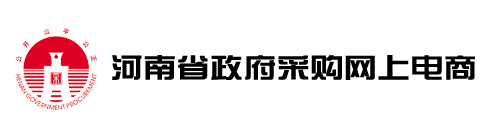
<style>
.page{position:relative;width:500px;height:135px;background:#ffffff}
.page>*{position:absolute;margin:0}
.t1{font:26.8px "HYk1gj";color:#000000;scale:1.25 1}
</style>
<div class="page">
<p class="t1" style="left:112px;top:55px;width:363px;height:25px">河南省政府采购网上电商</p>
</div>
